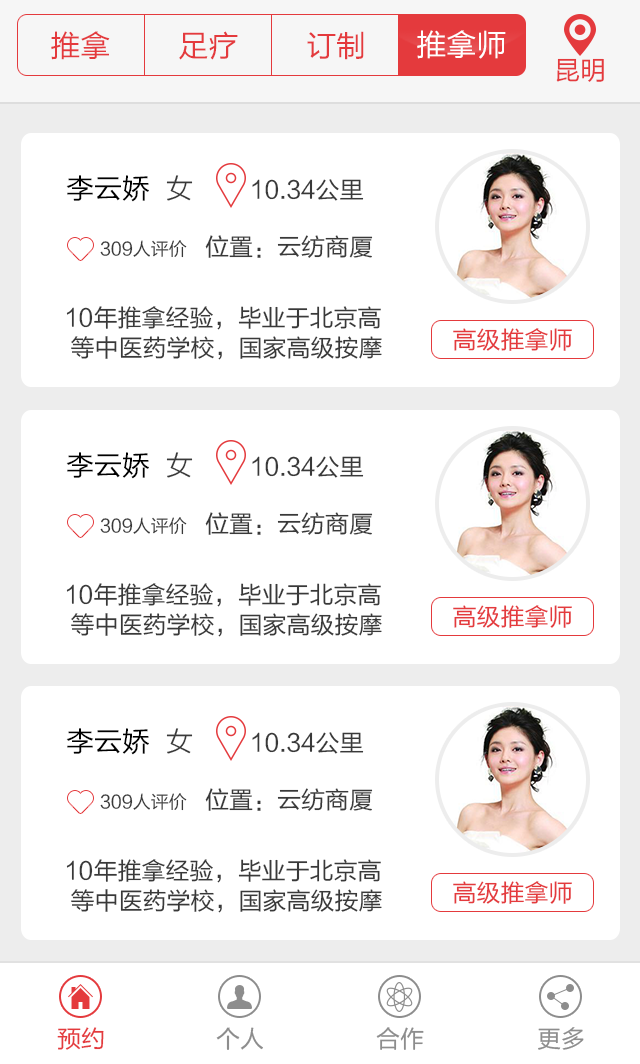
<style>
.page{position:relative;width:640px;height:1064px;background:#ffffff}
.page>*{position:absolute;margin:0}
.t1{font:30px "FZLTHJW--GB1-0";color:#ffffff}
.t2{font:30px "FZLTHJW--GB1-0";color:#e43a3d}
.t3{font:26px "FZLTHJW--GB1-0";color:#e43a3d}
.t4{font:28px "FZLTHJW--GB1-0";color:#000000}
.t5{font:28px "FZLTXHK";color:#393939}
.t6{font:24px "FZLTHJW--GB1-0";color:#393939}
.t7{font:18px "FZLTHJW--GB1-0";color:#393939}
.t8{font:24px/30px "FZLTHJW--GB1-0";color:#393939}
.t9{font:24px "FZLTHJW--GB1-0";color:#e43a3d}
.t10{font:24px "FZLTHJW--GB1-0";color:#8d8d8d}
</style>
<div class="page">
<p class="t1" style="left:417px;top:30px;width:89px;height:29px">推拿师</p>
<p class="t2" style="left:51px;top:31px;width:59px;height:29px">推拿</p>
<p class="t2" style="left:179px;top:31px;width:59px;height:29px">足疗</p>
<p class="t2" style="left:307px;top:31px;width:57px;height:29px">订制</p>
<p class="t3" style="left:556px;top:58px;width:48px;height:24px">昆明</p>
<p class="t4" style="left:66px;top:175px;width:127px;height:27px">李云娇  <span class="t5">女</span></p>
<p class="t6" style="left:252px;top:179px;width:112px;height:22px">10.34公里</p>
<p class="t7" style="left:100px;top:240px;width:87px;height:18px">309人评价</p>
<p class="t6" style="left:205px;top:235px;width:168px;height:23px">位置：云纺商厦</p>
<p class="t8" style="left:66px;top:306px;width:316px;height:54px">10年推拿经验，毕业于北京高<br> 等中医药学校，国家高级按摩</p>
<p class="t9" style="left:453px;top:328px;width:119px;height:23px">高级推拿师</p>
<p class="t4" style="left:66px;top:452px;width:127px;height:27px">李云娇  <span class="t5">女</span></p>
<p class="t6" style="left:252px;top:456px;width:112px;height:22px">10.34公里</p>
<p class="t7" style="left:100px;top:517px;width:87px;height:18px">309人评价</p>
<p class="t6" style="left:205px;top:512px;width:168px;height:23px">位置：云纺商厦</p>
<p class="t8" style="left:66px;top:583px;width:316px;height:54px">10年推拿经验，毕业于北京高<br> 等中医药学校，国家高级按摩</p>
<p class="t9" style="left:453px;top:605px;width:119px;height:23px">高级推拿师</p>
<p class="t4" style="left:66px;top:728px;width:127px;height:27px">李云娇  <span class="t5">女</span></p>
<p class="t6" style="left:252px;top:732px;width:112px;height:22px">10.34公里</p>
<p class="t7" style="left:100px;top:793px;width:87px;height:18px">309人评价</p>
<p class="t6" style="left:205px;top:788px;width:168px;height:23px">位置：云纺商厦</p>
<p class="t8" style="left:66px;top:859px;width:316px;height:54px">10年推拿经验，毕业于北京高<br> 等中医药学校，国家高级按摩</p>
<p class="t9" style="left:453px;top:881px;width:119px;height:23px">高级推拿师</p>
<p class="t9" style="left:57px;top:1027px;width:47px;height:23px">预约</p>
<p class="t10" style="left:216px;top:1027px;width:47px;height:23px">个人</p>
<p class="t10" style="left:376px;top:1027px;width:48px;height:23px">合作</p>
<p class="t10" style="left:538px;top:1027px;width:46px;height:23px">更多</p>
</div>
